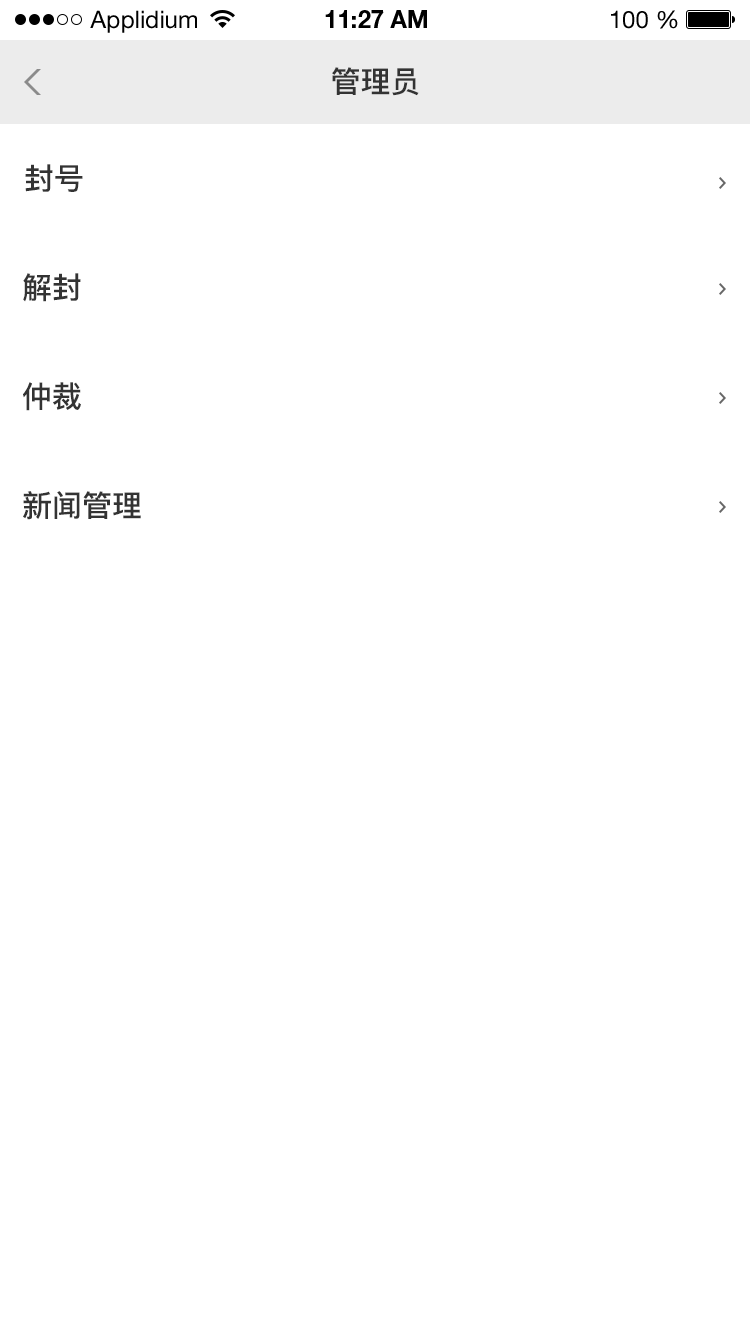
<style>
.page{position:relative;width:750px;height:1334px;background:#ffffff}
.page>*{position:absolute;margin:0}
.t1{font:24px "HelveticaNeueLTStd-Roman";color:#000000}
.t2{font:24px "HelveticaNeueLTStd-Bd";color:#000000}
.t3{font:30px "PingFang-SC-Bold";color:#333333}
</style>
<div class="page">
<p class="t1" style="left:90px;top:10px;width:107px;height:23px">Applidium</p>
<p class="t2" style="left:325px;top:10px;width:102px;height:18px">11:27 AM</p>
<p class="t1" style="left:611px;top:10px;width:67px;height:19px">100 %</p>
<p class="t3" style="left:332px;top:67px;width:87px;height:29px">管理员</p>
<p class="t3" style="left:25px;top:164px;width:58px;height:28px">封号</p>
<p class="t3" style="left:23px;top:273px;width:58px;height:29px">解封</p>
<p class="t3" style="left:23px;top:382px;width:58px;height:29px">仲裁</p>
<p class="t3" style="left:23px;top:491px;width:118px;height:29px">新闻管理</p>
</div>
